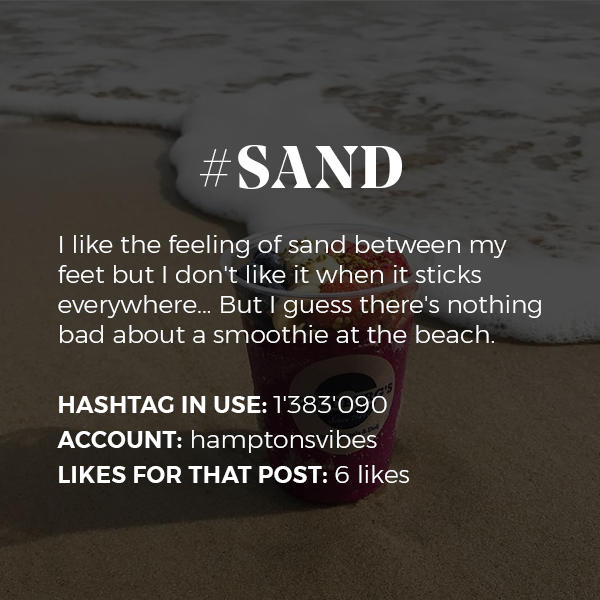
<style>
.page{position:relative;width:600px;height:600px}
.page>*{position:absolute;margin:0}
.t1{font:25px "Montserrat-Light";color:#ffffff}
.t2{font:60px/35px "NoeDisplay-Bold";letter-spacing:0.05em;color:#ffffff;text-transform:uppercase}
.t3{font:23px/35px "Montserrat-SemiBold";letter-spacing:0.02em;color:#ffffff;text-transform:uppercase}
.t4{font:25px/35px "Montserrat-Light";color:#ffffff}
</style>
<div class="page">
<p class="t1" style="left:57px;top:145px;width:484px;height:338px;text-align:center"><span class="t2">#sand<br><br></span>I like the feeling of sand between my feet but I don't like it when it sticks everywhere... But I guess there's nothing bad about a smoothie at the beach. <br><br><span class="t3">Hashtag in use: </span><span class="t4">1'383'090<br></span><span class="t3">Account:</span><span class="t4"> hamptonsvibes<br></span><span class="t3">Likes for that post: </span><span class="t4">6 likes</span></p>
</div>
